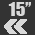
<style>
.page{position:relative;width:35px;height:35px;background:#333333}
.page>*{position:absolute;margin:0}
.t1{font:18px "Impact";color:#d9d9d9}
</style>
<div class="page">
<p class="t1" style="left:8px;top:2px;width:23px;height:14px">15’’</p>
</div>
